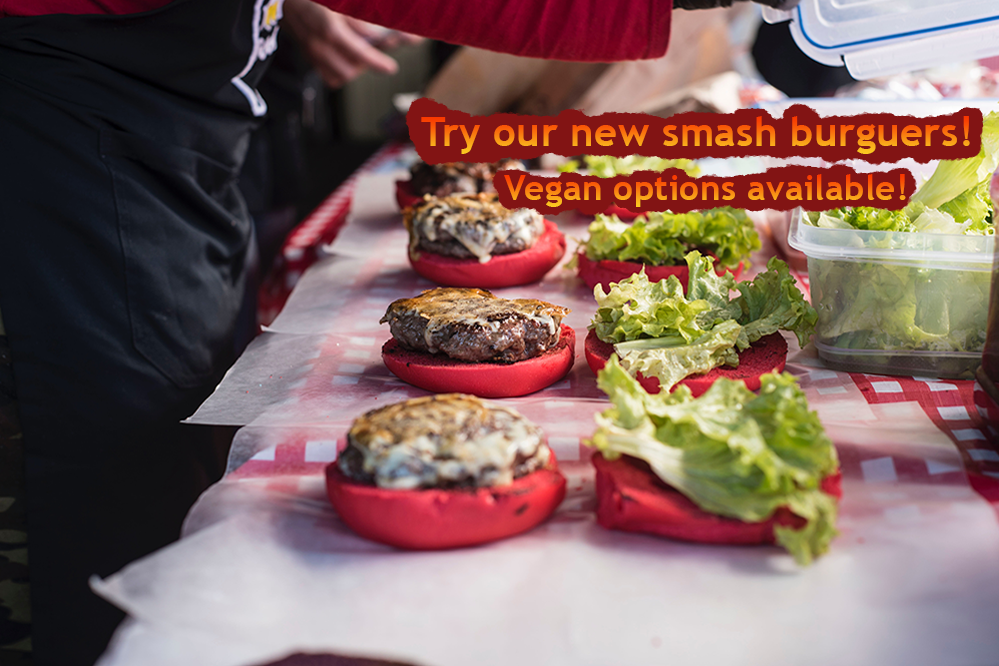
<style>
.page{position:relative;width:999px;height:666px}
.page>*{position:absolute;margin:0}
.t1{font:40px "TrebuchetMS-Bold";letter-spacing:0.01em}
.t2{font:35px "TrebuchetMS-Bold";letter-spacing:0.01em}
</style>
<div class="page">
<p class="t1" style="left:421px;top:116px;width:549px;height:38px">Try our new smash burguers!</p>
<p class="t2" style="left:504px;top:174px;width:402px;height:33px">Vegan options available!</p>
</div>
